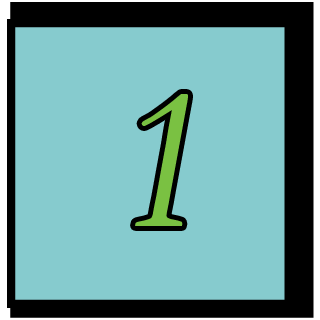
<style>
.page{position:relative;width:320px;height:320px;background:#86cbce}
.page>*{position:absolute;margin:0}
.t1{font:208.3px "Garamond";color:#7ac142;font-style:italic}
</style>
<div class="page">
<p class="t1" style="left:135px;top:94px;width:53px;height:132px">1</p>
</div>
